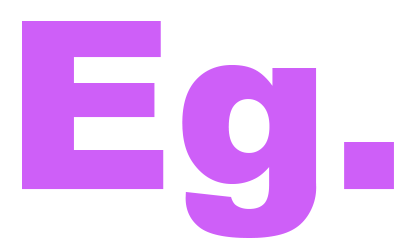
<style>
.page{position:relative;width:417px;height:250px;background:#ffffff}
.page>*{position:absolute;margin:0}
.t1{font:234.1px "Arial-Black";color:#ce5ff8}
</style>
<div class="page">
<p class="t1" style="left:22px;top:21px;width:372px;height:217px">Eg.</p>
</div>
